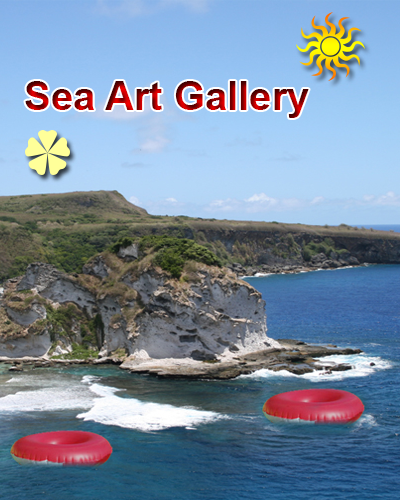
<style>
.page{position:relative;width:400px;height:500px}
.page>*{position:absolute;margin:0}
.t1{font:40px "Arial-BoldMT"}
</style>
<div class="page">
<p class="t1" style="left:25px;top:81px;width:284px;height:37px">Sea Art Gallery</p>
</div>
